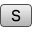
<style>
.page{position:relative;width:32px;height:32px;background:#ffffff}
.page>*{position:absolute;margin:0}
.t1{font:14px "HiraKakuPro-W6";letter-spacing:0.01em;color:#000000}
</style>
<div class="page">
<p class="t1" style="left:11px;top:9px;width:10px;height:13px">S</p>
</div>
